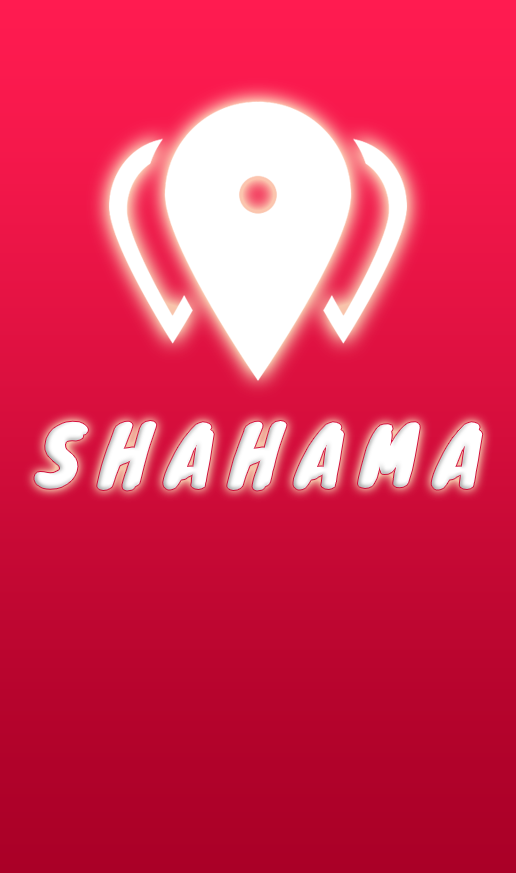
<style>
.page{position:relative;width:516px;height:873px}
.page>*{position:absolute;margin:0}
.t1{font:80px "Knewave-Regular";letter-spacing:0.237em;color:#ffffff}
</style>
<div class="page">
<p class="t1" style="left:34px;top:421px;width:449px;height:70px">SHAHAMA</p>
</div>
